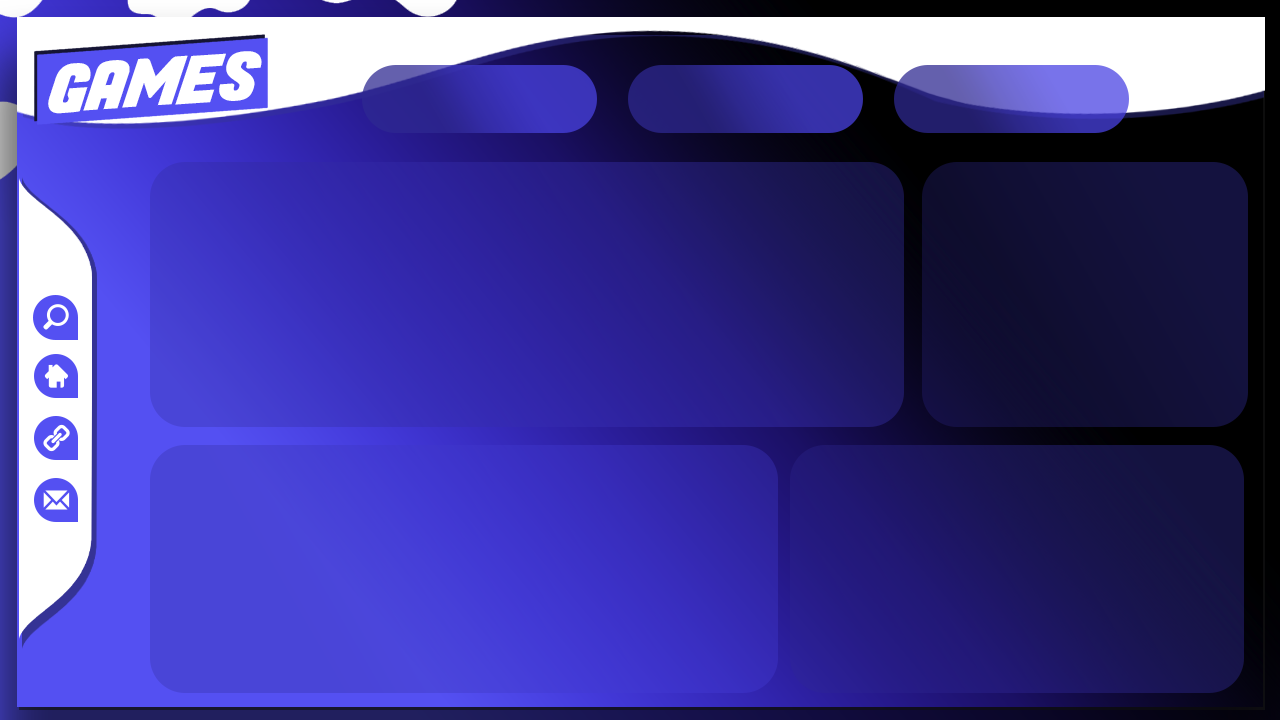
<style>
.page{position:relative;width:1280px;height:720px}
.page>*{position:absolute;margin:0}
.t1{font:64.4px "Longhaul";color:#ffffff}
</style>
<div class="page">
<p class="t1" style="left:48px;top:51px;width:214px;height:63px;rotate:-4deg">GAMES</p>
</div>
